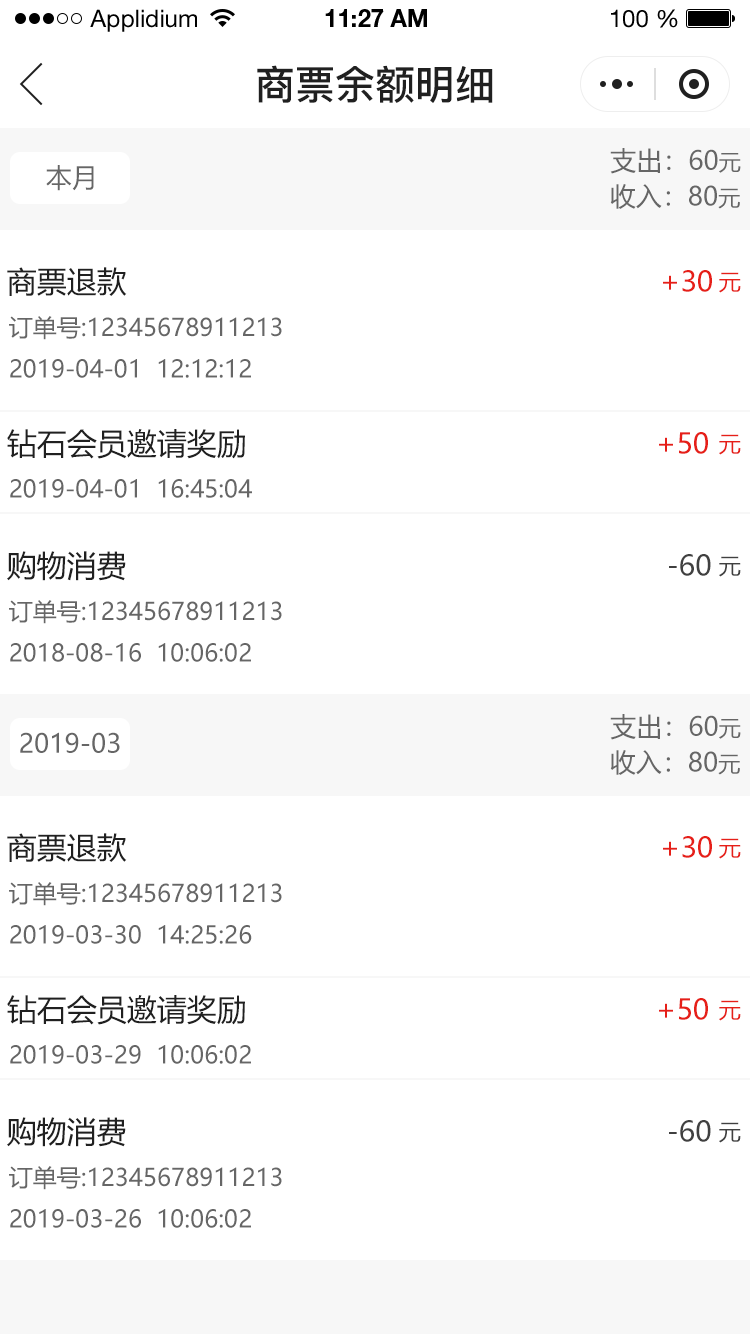
<style>
.page{position:relative;width:750px;height:1334px;background:#ffffff}
.page>*{position:absolute;margin:0}
.t1{font:24px "HelveticaNeueLTStd-Roman";color:#000000}
.t2{font:24px "HelveticaNeueLTStd-Bd";color:#000000}
.t3{font:40px "PingFang-SC-Bold";color:#202020;text-transform:uppercase}
.t4{font:26px "MicrosoftYaHei";color:#666666;text-transform:uppercase}
.t5{font:22px "MicrosoftYaHei";color:#666666;text-transform:uppercase}
.t6{font:30px "MicrosoftYaHei";color:#202020;text-transform:uppercase}
.t7{font:28px "MicrosoftYaHei";color:#e61f18;text-transform:uppercase}
.t8{font:22px "MicrosoftYaHei";color:#e61f18;text-transform:uppercase}
.t9{font:24px "MicrosoftYaHei";color:#666666;text-transform:uppercase}
.t10{font:28px "MicrosoftYaHei";color:#404040;text-transform:uppercase}
.t11{font:22px "MicrosoftYaHei";color:#404040;text-transform:uppercase}
</style>
<div class="page">
<p class="t1" style="left:90px;top:9px;width:107px;height:23px">Applidium</p>
<p class="t2" style="left:325px;top:9px;width:102px;height:18px">11:27 AM</p>
<p class="t1" style="left:611px;top:9px;width:67px;height:19px">100 %</p>
<p class="t3" style="left:257px;top:65px;width:236px;height:38px">商票余额明细</p>
<p class="t4" style="left:610px;top:148px;width:131px;height:26px">支出：60<span class="t5">元</span></p>
<p class="t4" style="left:46px;top:165px;width:48px;height:26px">本月</p>
<p class="t4" style="left:610px;top:184px;width:130px;height:25px">收入：80<span class="t5">元</span></p>
<p class="t6" style="left:7px;top:267px;width:120px;height:29px">商票退款</p>
<p class="t7" style="left:663px;top:270px;width:49px;height:22px">+30</p>
<p class="t8" style="left:719px;top:272px;width:22px;height:21px">元</p>
<p class="t9" style="left:9px;top:316px;width:273px;height:24px">订单号:12345678911213</p>
<p class="t9" style="left:10px;top:359px;width:241px;height:19px">2019-04-01  12:12:12</p>
<p class="t6" style="left:7px;top:429px;width:238px;height:30px">钻石会员邀请奖励</p>
<p class="t7" style="left:659px;top:432px;width:49px;height:22px">+50</p>
<p class="t8" style="left:719px;top:434px;width:22px;height:21px">元</p>
<p class="t9" style="left:10px;top:479px;width:242px;height:19px">2019-04-01  16:45:04</p>
<p class="t6" style="left:7px;top:551px;width:119px;height:30px">购物消费</p>
<p class="t10" style="left:669px;top:554px;width:42px;height:22px">-60</p>
<p class="t11" style="left:719px;top:556px;width:22px;height:21px">元</p>
<p class="t9" style="left:9px;top:600px;width:273px;height:24px">订单号:12345678911213</p>
<p class="t9" style="left:10px;top:643px;width:241px;height:19px">2018-08-16  10:06:02</p>
<p class="t4" style="left:610px;top:714px;width:131px;height:26px">支出：60<span class="t5">元</span></p>
<p class="t4" style="left:20px;top:732px;width:100px;height:21px">2019-03</p>
<p class="t4" style="left:610px;top:750px;width:130px;height:25px">收入：80<span class="t5">元</span></p>
<p class="t6" style="left:7px;top:833px;width:120px;height:29px">商票退款</p>
<p class="t7" style="left:663px;top:836px;width:49px;height:22px">+30</p>
<p class="t8" style="left:719px;top:838px;width:22px;height:21px">元</p>
<p class="t9" style="left:9px;top:882px;width:273px;height:24px">订单号:12345678911213</p>
<p class="t9" style="left:10px;top:925px;width:242px;height:19px">2019-03-30  14:25:26</p>
<p class="t6" style="left:7px;top:995px;width:238px;height:30px">钻石会员邀请奖励</p>
<p class="t7" style="left:659px;top:998px;width:49px;height:22px">+50</p>
<p class="t8" style="left:719px;top:1000px;width:22px;height:21px">元</p>
<p class="t9" style="left:10px;top:1045px;width:241px;height:19px">2019-03-29  10:06:02</p>
<p class="t6" style="left:7px;top:1117px;width:119px;height:30px">购物消费</p>
<p class="t10" style="left:669px;top:1120px;width:42px;height:22px">-60</p>
<p class="t11" style="left:719px;top:1122px;width:22px;height:21px">元</p>
<p class="t9" style="left:9px;top:1166px;width:273px;height:24px">订单号:12345678911213</p>
<p class="t9" style="left:10px;top:1209px;width:241px;height:19px">2019-03-26  10:06:02</p>
</div>
